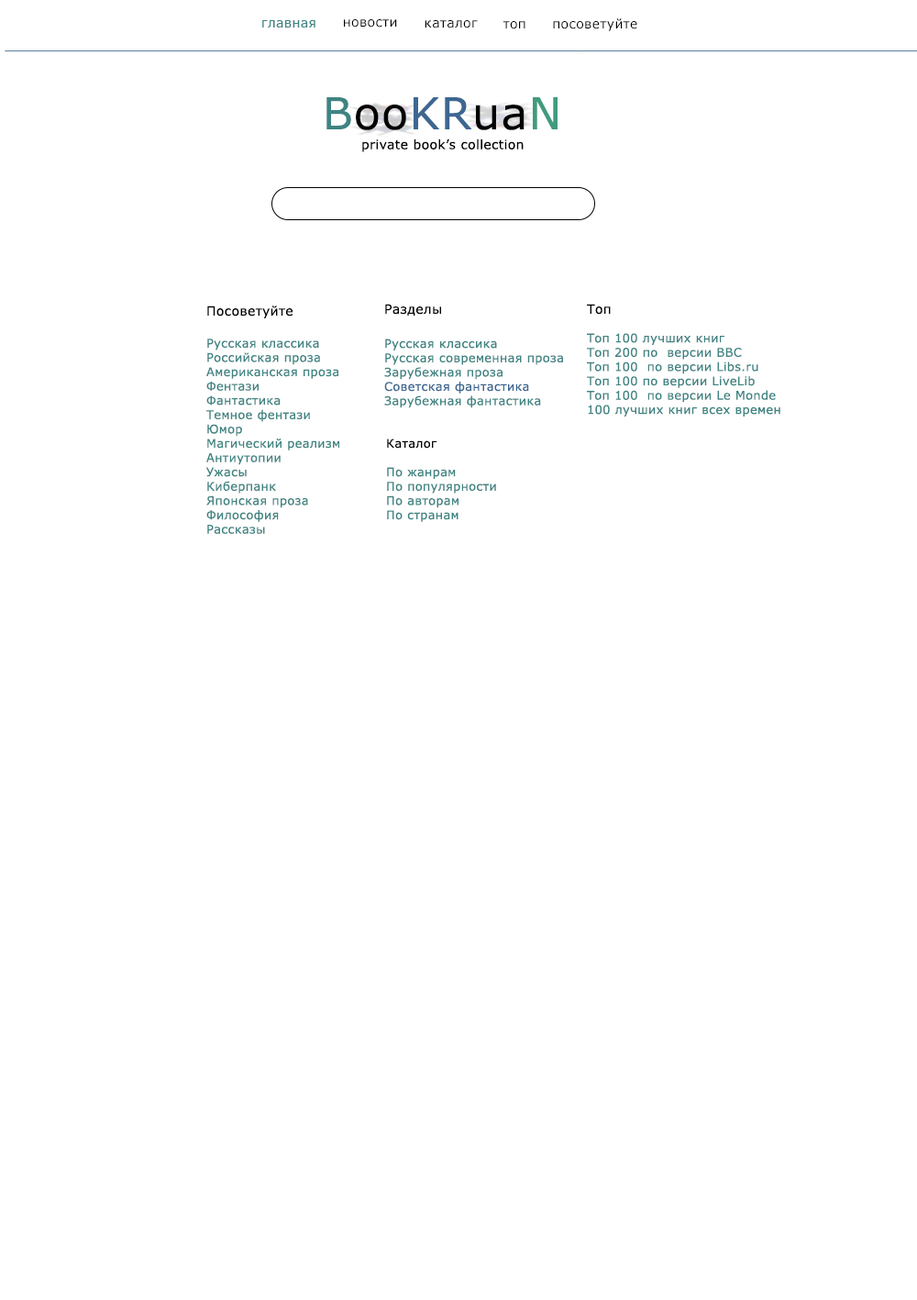
<style>
.page{position:relative;width:917px;height:1300px;background:#ffffff}
.page>*{position:absolute;margin:0}
.t1{font:12.8px "MSReferenceSansSerif";letter-spacing:0.025em;color:#3e8482}
.t2{font:12.8px "MSReferenceSansSerif";letter-spacing:0.025em;color:#010101}
.t3{font:12.8px "MSReferenceSansSerif";letter-spacing:0.025em;color:#000000}
.t4{font:44px "MSReferenceSansSerif";letter-spacing:0.025em;color:#3e8482}
.t5{font:44px "MSReferenceSansSerif";letter-spacing:0.025em;color:#010101}
.t6{font:44px "MSReferenceSansSerif";letter-spacing:0.025em;color:#3d6791}
.t7{font:44px "MSReferenceSansSerif";letter-spacing:0.025em;color:#419b7f}
.t8{font:11.9px "MSReferenceSansSerif";letter-spacing:0.025em;color:#3e8482}
.t9{font:11.9px "MSReferenceSansSerif";letter-spacing:0.025em;color:#3d6791}
.t10{font:11.9px "MSReferenceSansSerif";letter-spacing:0.025em;color:#000000}
</style>
<div class="page">
<p class="t1" style="left:262px;top:20px;width:54px;height:8px">главная</p>
<p class="t2" style="left:344px;top:19px;width:53px;height:9px">новости</p>
<p class="t2" style="left:425px;top:20px;width:53px;height:8px">каталог</p>
<p class="t3" style="left:503px;top:21px;width:23px;height:8px">топ</p>
<p class="t3" style="left:553px;top:18px;width:85px;height:13px">посоветуйте</p>
<p class="t2" style="left:327px;top:97px;width:231px;height:55px;text-align:center"><span class="t4">B</span><span class="t5">oo</span><span class="t6">KR</span><span class="t5">ua</span><span class="t7">N<br> </span>private book’s collection</p>
<p class="t8" style="left:206px;top:305px;width:133px;height:229px"><span class="t3">Посоветуйте<br><br></span>Русская классика <br>Российская проза <br>Американская проза <br>Фентази<br>Фантастика <br>Темное фентази <br>Юмор <br>Магический реализм <br>Антиутопии <br>Ужасы <br>Киберпанк <br>Японская проза <br>Философия <br>Рассказы</p>
<p class="t8" style="left:384px;top:304px;width:179px;height:104px"><span class="t2">Разделы<br><br></span>Русская классика <br>Русская современная проза <br>Зарубежная проза<br><span class="t9">Советская фантастика<br></span>Зарубежная фантастика</p>
<p class="t8" style="left:587px;top:304px;width:194px;height:112px"><span class="t3">Топ<br><br></span>Топ 100 лучших книг<br>Топ 200 по  версии ВВС<br>Топ 100  по версии Libs.ru<br>Топ 100 по версии LiveLib<br>Топ 100  по версии Le Monde<br>100 лучших книг всех времен</p>
<p class="t8" style="left:387px;top:438px;width:109px;height:84px"><span class="t10">Каталог <br><br></span>По жанрам<br>По популярности <br>По авторам <br>По странам</p>
</div>
